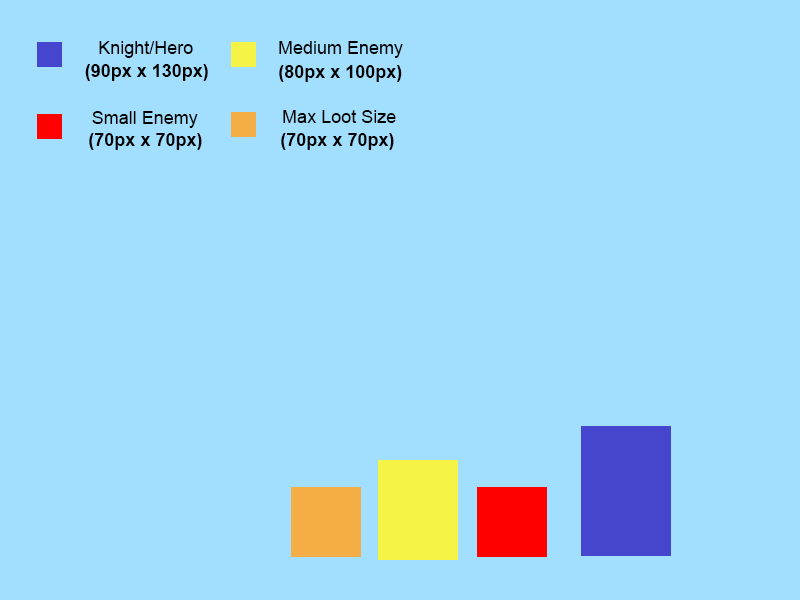
<style>
.page{position:relative;width:800px;height:600px;background:#a2dfff}
.page>*{position:absolute;margin:0}
.t1{font:18px "ArialMT";color:#000000}
.t2{font:18px "Arial-BoldMT";color:#000000}
</style>
<div class="page">
<p class="t1" style="left:99px;top:41px;width:94px;height:17px">Knight/Hero</p>
<p class="t1" style="left:279px;top:41px;width:124px;height:17px">Medium Enemy</p>
<p class="t2" style="left:85px;top:64px;width:123px;height:17px">(90px x 130px)</p>
<p class="t2" style="left:279px;top:65px;width:123px;height:17px">(80px x 100px)</p>
<p class="t1" style="left:92px;top:111px;width:106px;height:17px">Small Enemy</p>
<p class="t1" style="left:283px;top:110px;width:113px;height:13px">Max Loot Size</p>
<p class="t2" style="left:89px;top:133px;width:113px;height:17px">(70px x 70px)</p>
<p class="t2" style="left:281px;top:133px;width:113px;height:17px">(70px x 70px)</p>
</div>
